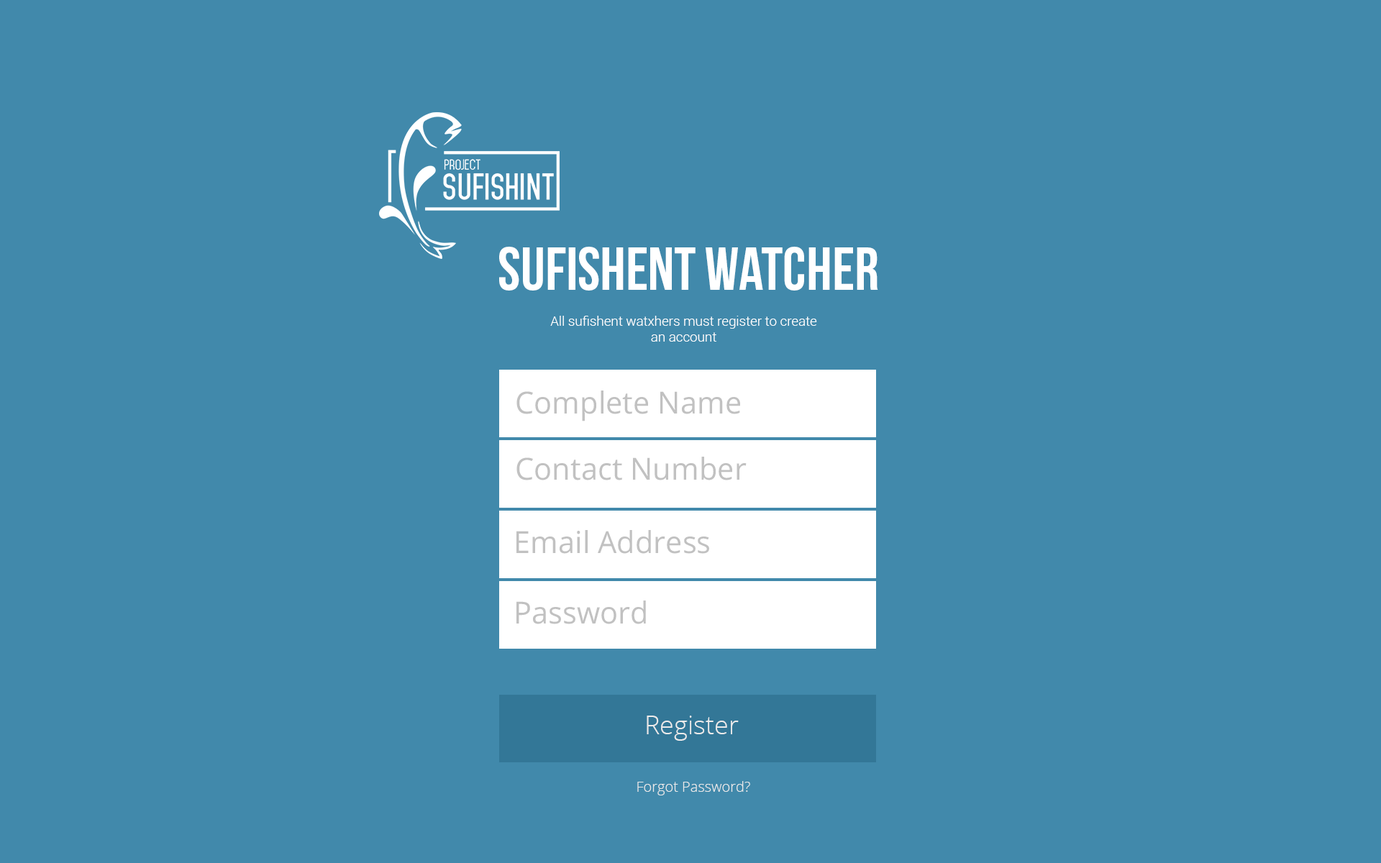
<style>
.page{position:relative;width:1381px;height:863px;background:#4189ab}
.page>*{position:absolute;margin:0}
.t1{font:60.2px "BebasNeue";color:#ffffff}
.t2{font:13.6px/15.4px "Roboto-Light";color:#ffffff}
.t3{font:30.4px "OpenSans";color:#c1c1c1}
.t4{font:25.9px "OpenSans-Light";color:#ebebeb}
.t5{font:14.4px "OpenSans-Light";color:#ebebeb}
</style>
<div class="page">
<p class="t1" style="left:499px;top:247px;width:379px;height:44px">SUFISHENT WATCHER</p>
<p class="t2" style="left:550px;top:316px;width:267px;height:26px;text-align:center">All sufishent watxhers must register to create <br>an account</p>
<p class="t3" style="left:517px;top:391px;width:223px;height:31px">Complete Name</p>
<p class="t3" style="left:517px;top:457px;width:230px;height:24px">Contact Number</p>
<p class="t3" style="left:517px;top:530px;width:192px;height:24px">Email Address</p>
<p class="t3" style="left:517px;top:601px;width:129px;height:23px">Password</p>
<p class="t4" style="left:647px;top:716px;width:92px;height:25px">Register</p>
<p class="t5" style="left:637px;top:781px;width:113px;height:15px">Forgot Password?</p>
</div>
